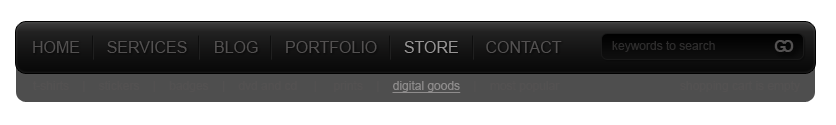
<style>
.page{position:relative;width:836px;height:125px;background:#ffffff}
.page>*{position:absolute;margin:0}
.t1{font:16px "ArialMT";color:#535151}
.t2{font:16px "ArialMT";color:#989696}
.t3{font:12px "ArialMT";color:#2d2c2c}
.t4{font:12px "ArialMT";color:#535151}
.t5{font:12px "ArialMT";color:#8e8c8c;text-decoration:underline}
</style>
<div class="page">
<p class="t1" style="left:33px;top:41px;width:529px;height:12px">HOME      SERVICES      BLOG      PORTFOLIO      <span class="t2">STORE</span>      CONTACT</p>
<p class="t3" style="left:612px;top:41px;width:103px;height:11px">keywords to search</p>
<p class="t4" style="left:33px;top:81px;width:527px;height:12px">t-shirts    |    stickers    |    badges    |    dvd and cd     |     prints    |    <span class="t5">digital goods</span>    |    most popular</p>
</div>
